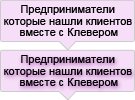
<style>
.page{position:relative;width:135px;height:100px;background:#f6def8}
.page>*{position:absolute;margin:0}
.t1{font:11px "ArialMT";color:#000000}
</style>
<div class="page">
<p class="t1" style="left:21px;top:5px;width:94px;height:10px">Предприниматели</p>
<p class="t1" style="left:4px;top:19px;width:128px;height:8px">которые нашли клиентов</p>
<p class="t1" style="left:20px;top:28px;width:98px;height:10px">вместе с Клевером</p>
</div>
